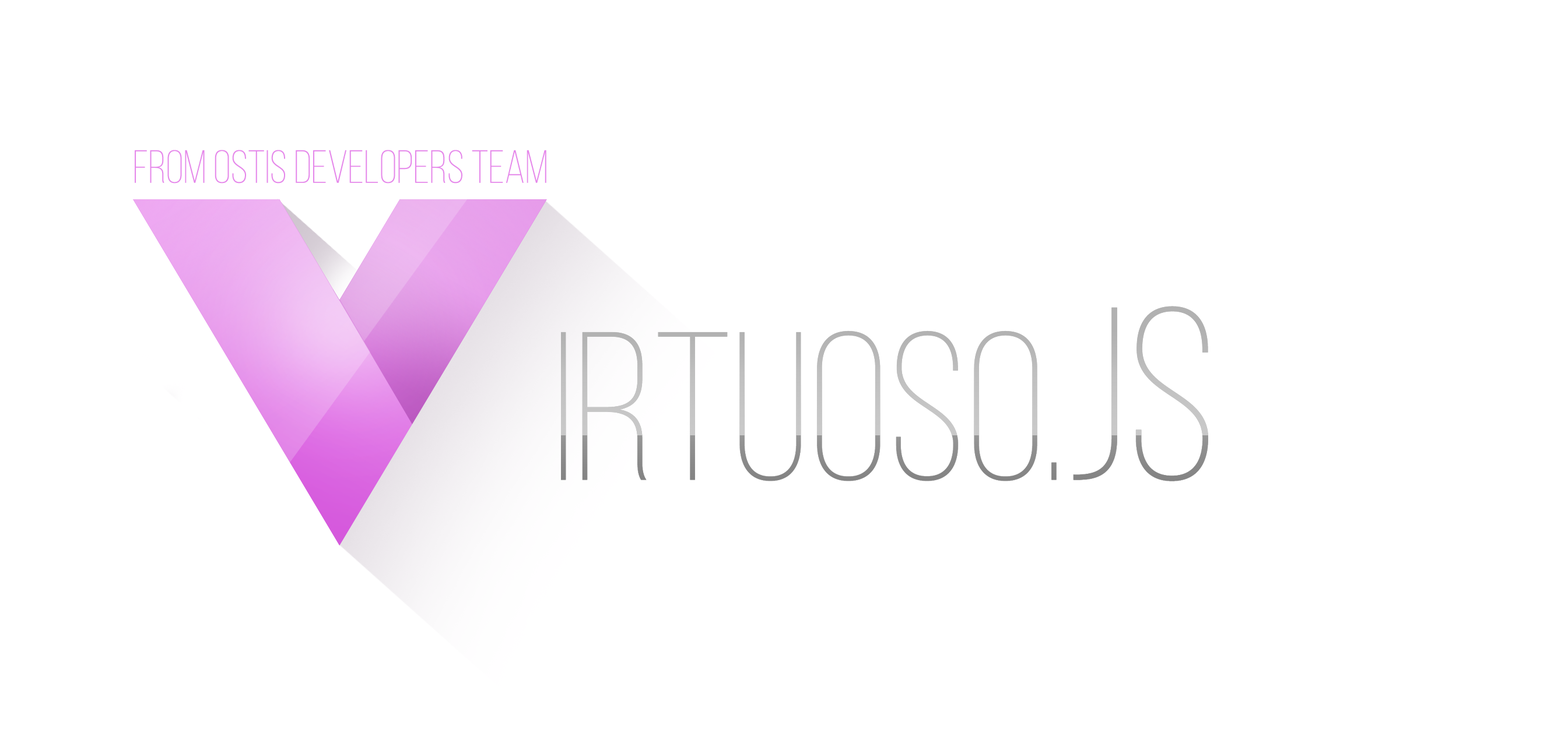
<style>
.page{position:relative;width:1568px;height:736px;background:#ffffff}
.page>*{position:absolute;margin:0}
.t1{font:46.5px "BebasNeueLight";color:#e587ea}
.t2{font:211px "BebasNeueLight";color:#b1b1b1}
.t3{font:246.1px "BebasNeueLight";color:#b1b1b1}
</style>
<div class="page">
<p class="t1" style="left:135px;top:150px;width:411px;height:34px">from OSTIS DEVELOPERS TEAM</p>
<p class="t2" style="left:561px;top:306px;width:647px;height:176px">irtuoso.<span class="t3">JS</span></p>
</div>
